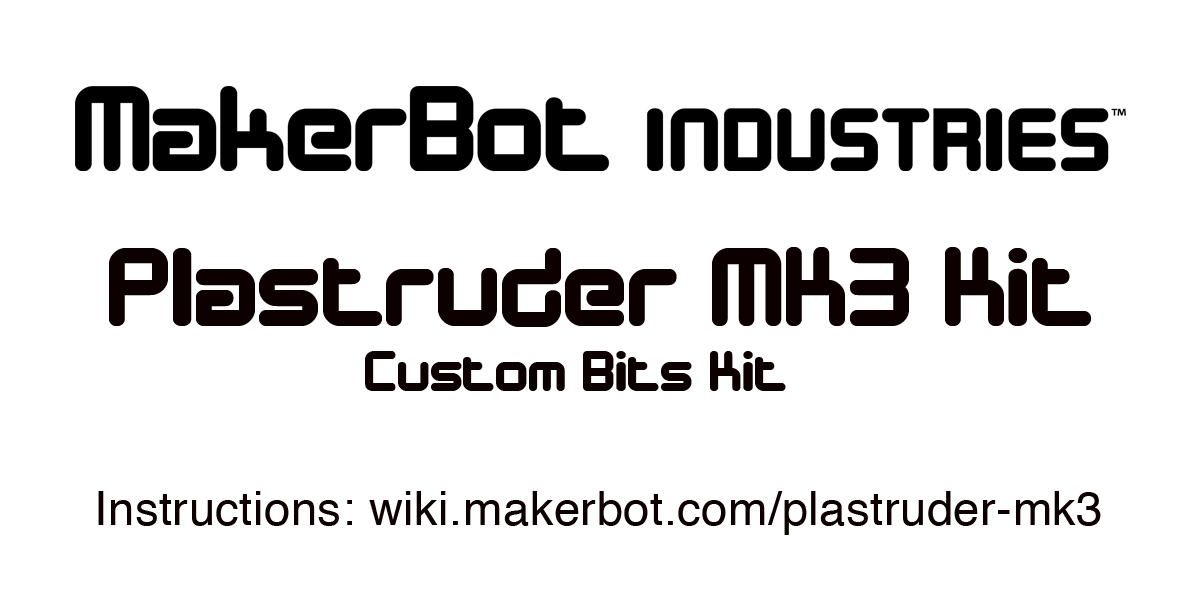
<style>
.page{position:relative;width:1200px;height:600px;background:#ffffff}
.page>*{position:absolute;margin:0}
.t1{font:114.5px "DesignerBlock";letter-spacing:0.01em;color:#0c0000}
.t2{font:59.1px "DesignerBlock";letter-spacing:0.01em;color:#0c0000}
.t3{font:47.2px "Helvetica";letter-spacing:0.01em;color:#0c0000}
</style>
<div class="page">
<p class="t1" style="left:109px;top:247px;width:982px;height:80px">Plastruder MK3 Kit</p>
<p class="t2" style="left:365px;top:351px;width:421px;height:40px">Custom Bits Kit</p>
<p class="t3" style="left:98px;top:491px;width:1003px;height:44px">Instructions: wiki.makerbot.com/plastruder-mk3</p>
</div>
